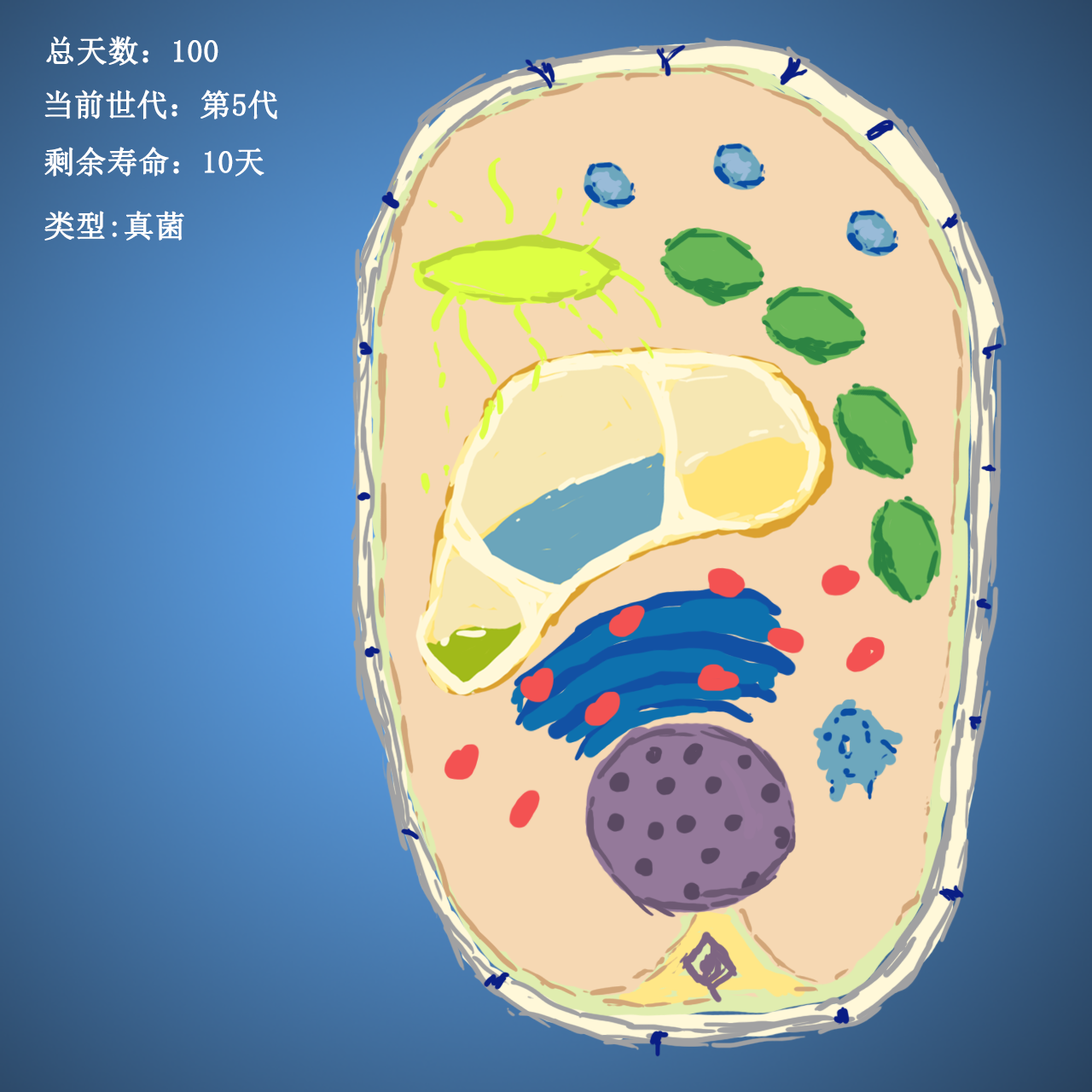
<style>
.page{position:relative;width:1092px;height:1092px}
.page>*{position:absolute;margin:0}
.t1{font:30.7px "SimSun";color:#ffffff;font-weight:bold}
</style>
<div class="page">
<p class="t1" style="left:46px;top:36px;width:172px;height:30px">总天数：100</p>
<p class="t1" style="left:44px;top:90px;width:233px;height:29px">当前世代：第5代</p>
<p class="t1" style="left:44px;top:147px;width:220px;height:30px">剩余寿命：10天</p>
<p class="t1" style="left:44px;top:211px;width:140px;height:30px">类型:真菌</p>
</div>
